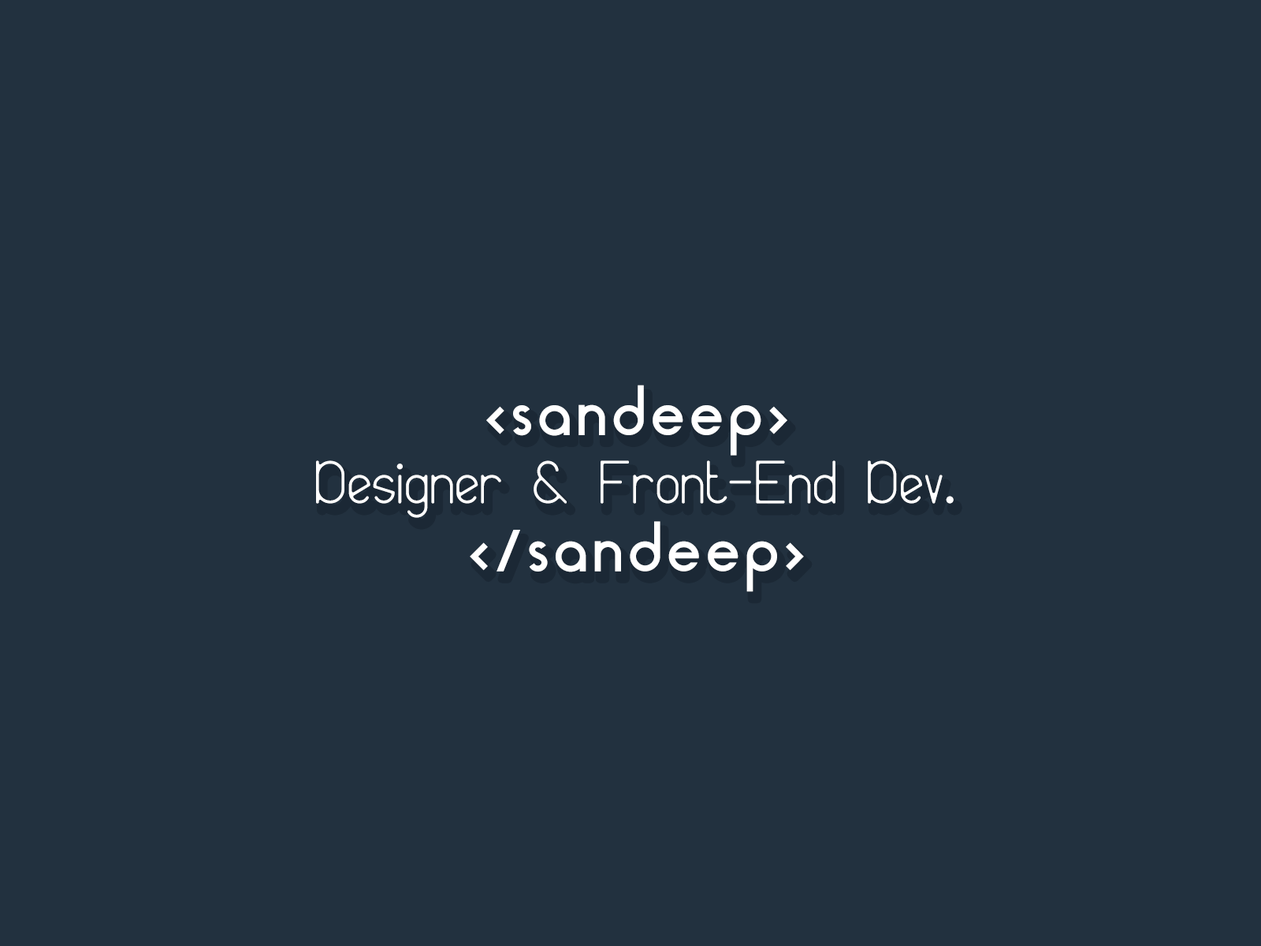
<style>
.page{position:relative;width:1261px;height:946px;background:#22313f}
.page>*{position:absolute;margin:0}
.t1{font:56.7px "Bireun";color:#ffffff}
.t2{font:56.7px "AquaGrotesque";color:#ffffff}
</style>
<div class="page">
<p class="t1" style="left:316px;top:385px;width:638px;height:207px;text-align:center"><span class="t2">&lt;sandeep&gt;<br></span>Designer &amp; Front-End Dev.<br><span class="t2">&lt;/sandeep&gt;</span></p>
</div>
